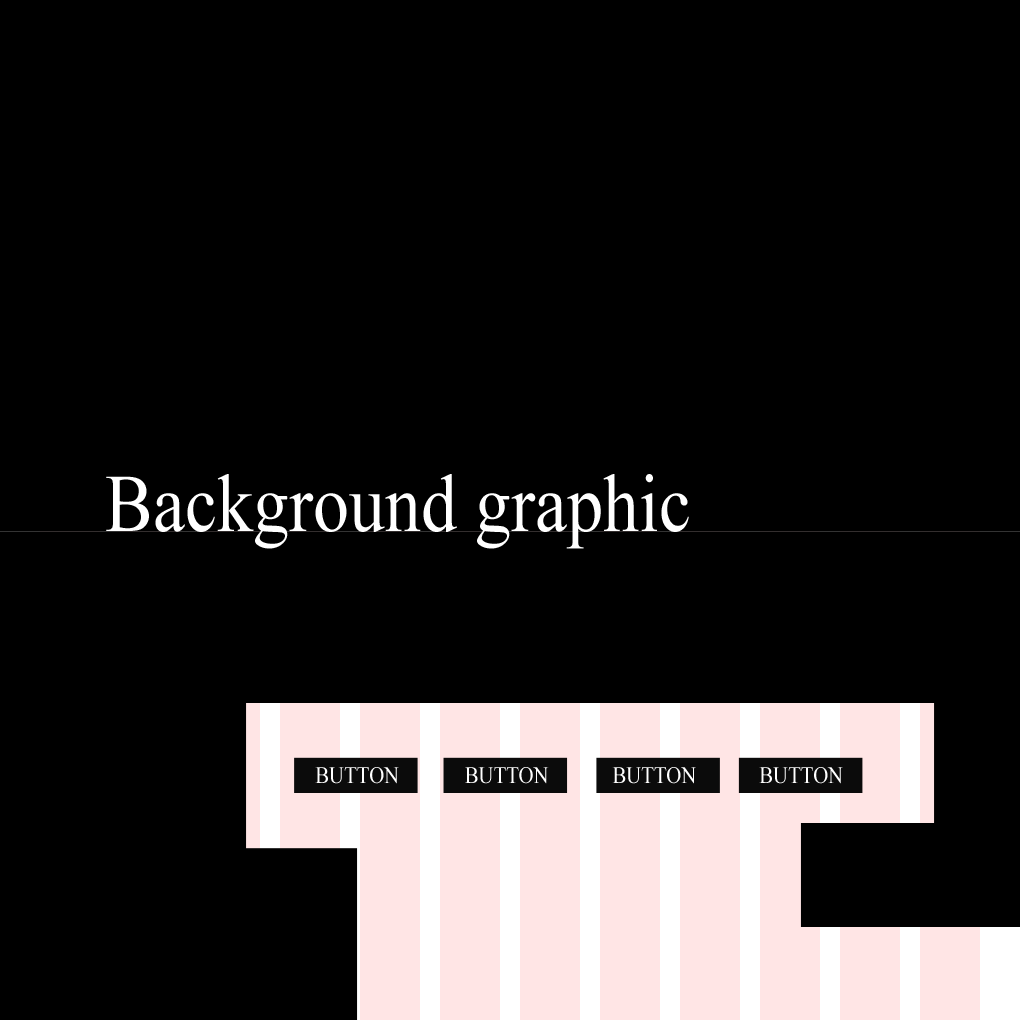
<style>
.page{position:relative;width:1020px;height:1020px;background:#000000}
.page>*{position:absolute;margin:0}
.t1{font:81.9px "TimesNewRomanPSMT";color:#ffffff;scale:0.88 1}
.t2{font:23.5px "TimesNewRomanPSMT";color:#ffffff;scale:0.88 1}
</style>
<div class="page">
<p class="t1" style="left:106px;top:474px;width:583px;height:75px">Background graphic</p>
<p class="t2" style="left:315px;top:767px;width:84px;height:17px">BUTTON</p>
<p class="t2" style="left:465px;top:767px;width:84px;height:17px">BUTTON</p>
<p class="t2" style="left:612px;top:767px;width:84px;height:17px">BUTTON</p>
<p class="t2" style="left:759px;top:767px;width:84px;height:17px">BUTTON</p>
</div>
